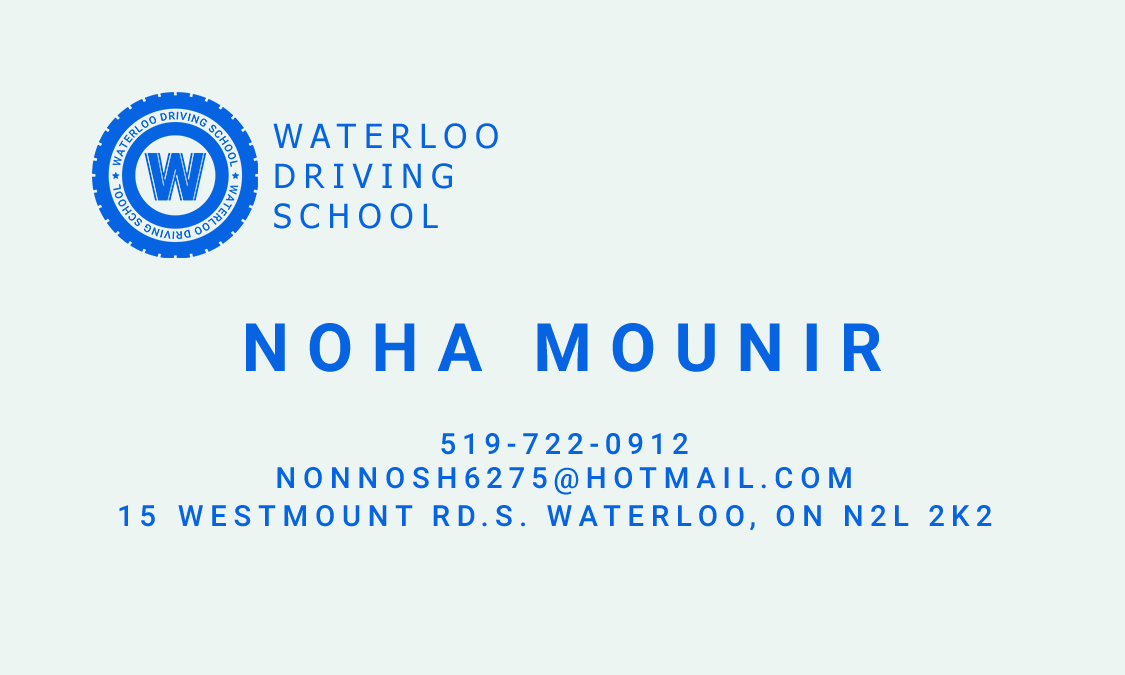
<style>
.page{position:relative;width:1125px;height:675px;background:#edf5f3}
.page>*{position:absolute;margin:0}
.t1{font:33.3px "Tahoma";letter-spacing:0.24em;color:#0663e1;text-transform:uppercase}
.t2{font:66.7px "Roboto-Bold";letter-spacing:0.24em;color:#0663e1;text-transform:uppercase}
.t3{font:29.2px "Roboto-Medium";letter-spacing:0.2em;color:#0663e1;text-transform:uppercase}
</style>
<div class="page">
<p class="t1" style="left:273px;top:123px;width:225px;height:106px;text-align:right">Waterloo<br>Driving<br>School</p>
<p class="t2" style="left:246px;top:323px;width:635px;height:49px">Noha Mounir</p>
<p class="t3" style="left:441px;top:433px;width:247px;height:22px">519-722-0912</p>
<p class="t3" style="left:277px;top:467px;width:574px;height:28px">Nonnosh6275@Hotmail.com</p>
<p class="t3" style="left:119px;top:505px;width:873px;height:26px">15-westmount Rd.S. Waterloo, On N2L 2K2</p>
</div>
